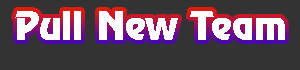
<style>
.page{position:relative;width:300px;height:70px;background:#333333}
.page>*{position:absolute;margin:0}
.t1{font:36px "Revue";color:#ffffff}
</style>
<div class="page">
<p class="t1" style="left:15px;top:11px;width:270px;height:29px">Pull New Team</p>
</div>
